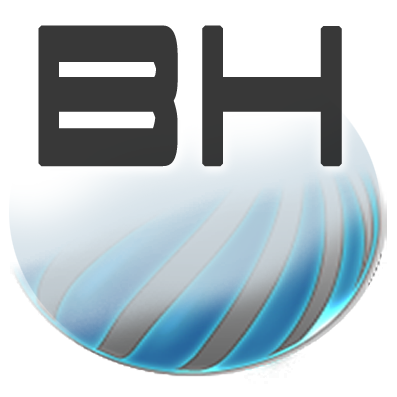
<style>
.page{position:relative;width:397px;height:397px;background:#ffffff}
.page>*{position:absolute;margin:0}
.t1{font:279.2px "911Porscha";letter-spacing:0.085em;color:#383838;font-weight:bold;scale:0.54 1}
</style>
<div class="page">
<p class="t1" style="left:38px;top:25px;width:304px;height:142px">Bh</p>
</div>
